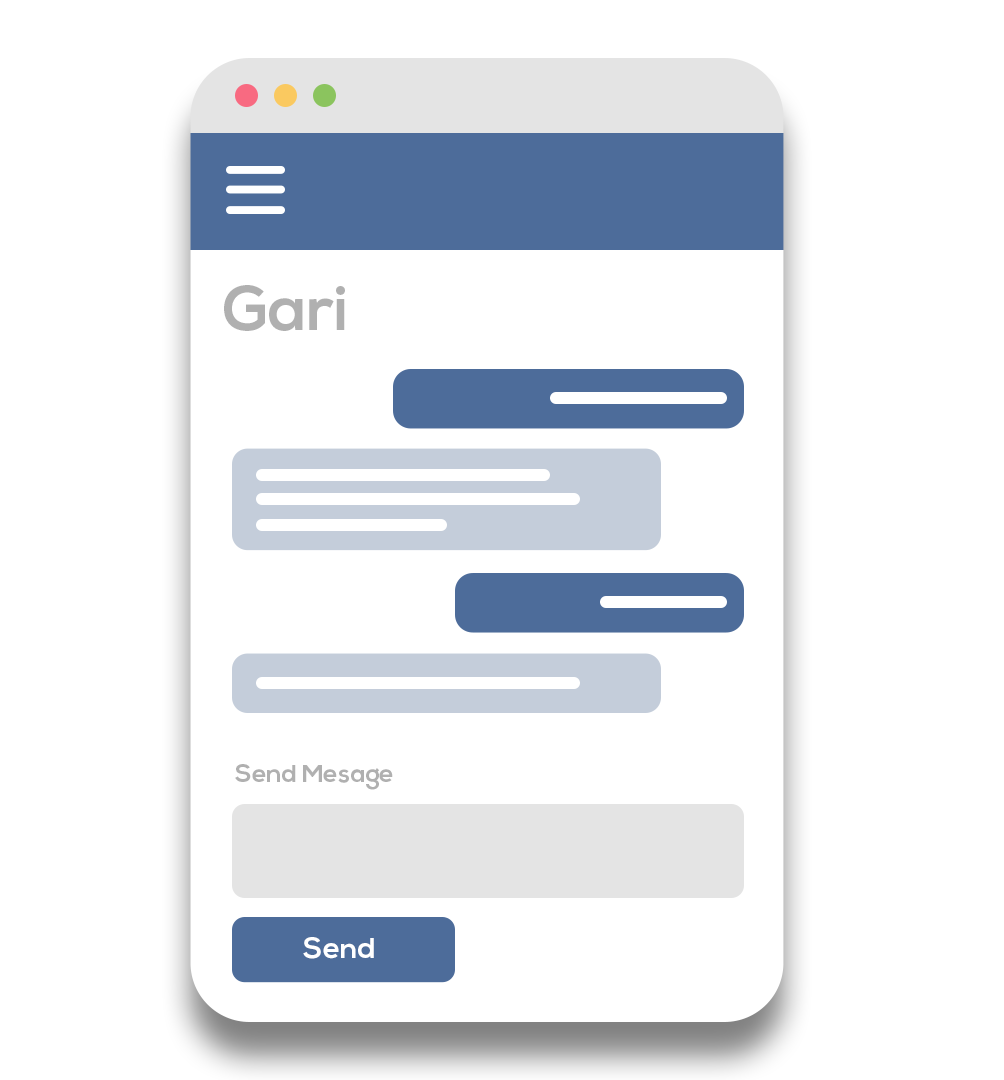
<style>
.page{position:relative;width:1004px;height:1080px;background:#ffffff}
.page>*{position:absolute;margin:0}
.t1{font:62.5px "NexaBold";color:#b0b0b0}
.t2{font:25px "NexaBold";color:#b0b0b0}
.t3{font:29.2px "NexaBold";color:#ffffff}
</style>
<div class="page">
<p class="t1" style="left:224px;top:285px;width:121px;height:46px">Gari</p>
<p class="t2" style="left:235px;top:764px;width:158px;height:26px">Send Mesage</p>
<p class="t3" style="left:303px;top:937px;width:71px;height:22px">Send</p>
</div>
